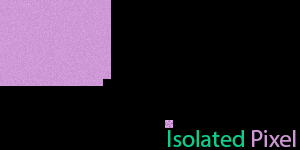
<style>
.page{position:relative;width:300px;height:150px;background:#000000}
.page>*{position:absolute;margin:0}
.t1{font:24px "MyriadPro-Regular";color:#0ece8c}
.t2{font:24px "MyriadPro-Regular";color:#ce97d5}
</style>
<div class="page">
<p class="t1" style="left:168px;top:130px;width:128px;height:17px">Isolated <span class="t2">Pixel</span></p>
</div>
